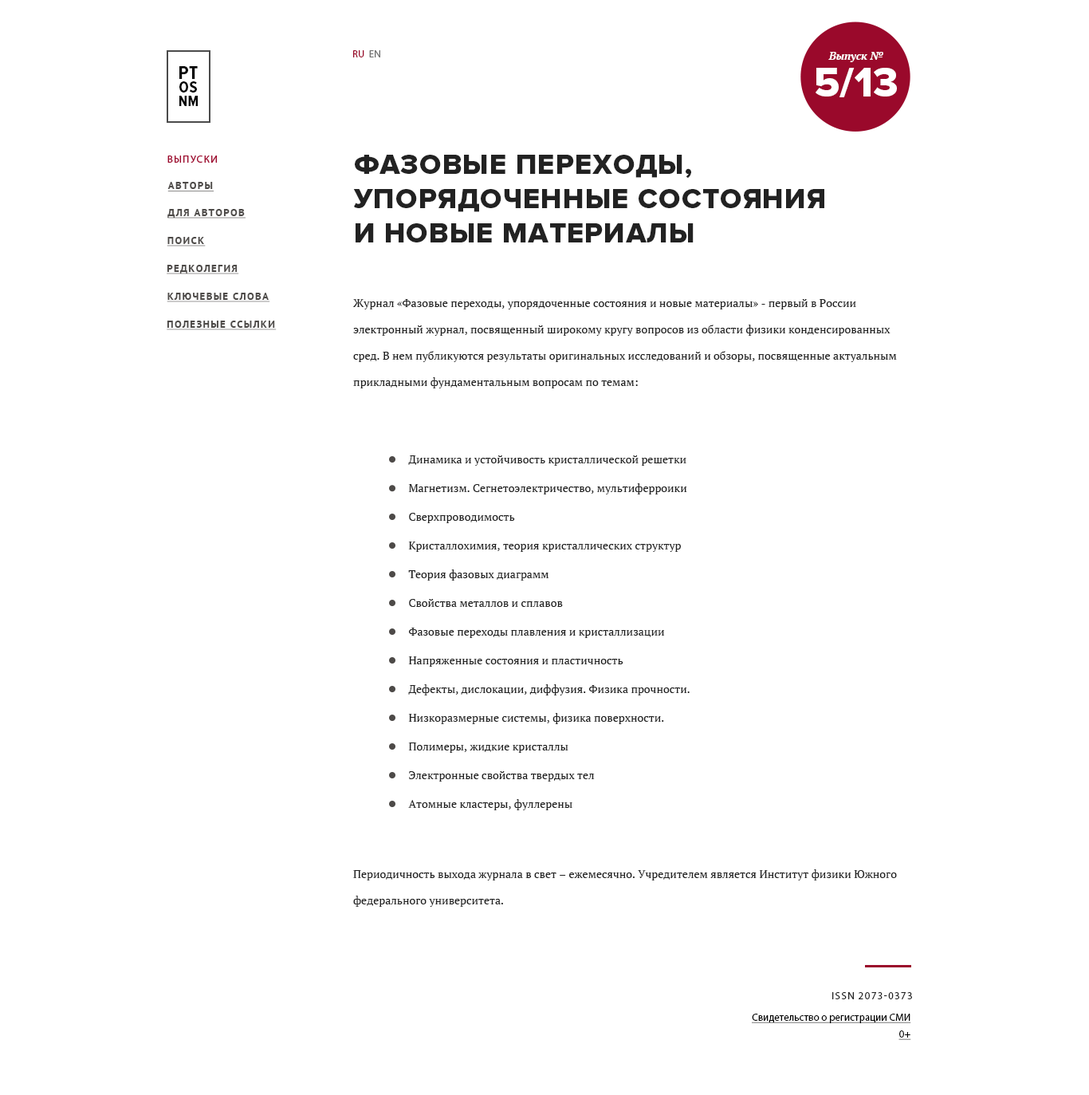
<style>
.page{position:relative;width:1089px;height:1095px;background:#ffffff}
.page>*{position:absolute;margin:0}
.t1{font:10.4px "MyriadPro-Regular";color:#9a092b}
.t2{font:10.4px "MyriadPro-Regular";color:#707070}
.t3{font:11.1px "PTSerif-BoldItalic";color:#ffffff}
.t4{font:18.8px/13.4px "ProximaNovaCond-Bold";letter-spacing:0.02em;color:#000000;text-transform:uppercase}
.t5{font:16.6px/13.4px "ProximaNovaCond-Bold";letter-spacing:0.02em;color:#000000;text-transform:uppercase}
.t6{font:14.5px/13.4px "ProximaNovaCond-Bold";letter-spacing:0.02em;color:#000000;text-transform:uppercase}
.t7{font:41.9px "ProximaNova-Extrabld";color:#ffffff}
.t8{font:28.7px/34.3px "ProximaNova-Extrabld";letter-spacing:0.03em;color:#222222;text-transform:uppercase}
.t9{font:10.4px "PTSans-Bold";letter-spacing:0.1em;color:#4d4a48;text-transform:uppercase;text-decoration:underline}
.t10{font:11.2px/26.3px "PTSerif-Regular";color:#222222}
.t11{font:11.2px/28.7px "PTSerif-Regular";color:#222222}
.t12{font:10.4px "MyriadPro-Regular";letter-spacing:0.1em;color:#222222;text-transform:uppercase}
.t13{font:10.4px/16.7px "MyriadPro-Regular";color:#000000;text-decoration:underline}
</style>
<div class="page">
<p class="t1" style="left:353px;top:50px;width:27px;height:7px">RU  <span class="t2">EN</span></p>
<p class="t3" style="left:828px;top:52px;width:55px;height:10px">Выпуск №</p>
<p class="t4" style="left:179px;top:66px;width:19px;height:40px">pt<br><span class="t5">os<br></span><span class="t6">nm</span></p>
<p class="t7" style="left:816px;top:68px;width:81px;height:29px">5/13</p>
<p class="t8" style="left:353px;top:155px;width:471px;height:87px">Фазовые переходы, <br>упорядоченные состояния<br>и новые материалы</p>
<p class="t9" style="left:167px;top:182px;width:47px;height:10px">авторы</p>
<p class="t9" style="left:167px;top:209px;width:79px;height:9px">для авторов</p>
<p class="t9" style="left:167px;top:237px;width:39px;height:9px">Поиск</p>
<p class="t9" style="left:167px;top:265px;width:72px;height:9px">Редколегия</p>
<p class="t9" style="left:167px;top:293px;width:103px;height:9px">Ключевые слова</p>
<p class="t10" style="left:352px;top:299px;width:545px;height:89px">Журнал «Фазовые переходы, упорядоченные состояния и новые материалы» - первый в России электронный журнал, посвященный широкому кругу вопросов из области физики конденсированных сред. В нем публикуются результаты оригинальных исследований и обзоры, посвященные актуальным прикладными фундаментальным вопросам по темам:</p>
<p class="t9" style="left:167px;top:321px;width:110px;height:9px">полезные Ссылки</p>
<p class="t11" style="left:408px;top:455px;width:282px;height:355px">Динамика и устойчивость кристаллической решетки<br>Магнетизм. Сегнетоэлектричество, мультиферроики<br>Сверхпроводимость<br>Кристаллохимия, теория кристаллических структур<br>Теория фазовых диаграмм<br>Свойства металлов и сплавов<br>Фазовые переходы плавления и кристаллизации<br>Напряженные состояния и пластичность<br>Дефекты, дислокации, диффузия. Физика прочности.<br>Низкоразмерные системы, физика поверхности.<br>Полимеры, жидкие кристаллы<br>Электронные свойства твердых тел<br>Атомные кластеры, фуллерены</p>
<p class="t10" style="left:353px;top:869px;width:544px;height:38px">Периодичность выхода журнала в свет – ежемесячно. Учредителем является Институт физики Южного федерального университета.</p>
<p class="t12" style="left:832px;top:992px;width:80px;height:7px">ISSN 2073-0373</p>
<p class="t13" style="left:752px;top:1013px;width:159px;height:27px;text-align:right">Свидетельство о регистрации СМИ<br>0+</p>
</div>
